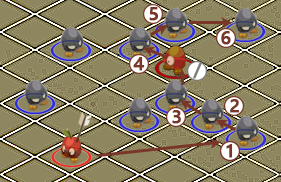
<style>
.page{position:relative;width:281px;height:182px;background:#8e865e}
.page>*{position:absolute;margin:0}
.t1{font:19px "SegoeUI-Semibold";color:#783729;font-weight:bold}
.t2{font:19px "SegoeUI-Semibold";color:#7c7c7c;font-weight:bold}
</style>
<div class="page">
<p class="t1" style="left:149px;top:7px;width:9px;height:14px">5</p>
<p class="t1" style="left:221px;top:31px;width:10px;height:14px">6</p>
<p class="t1" style="left:133px;top:57px;width:12px;height:14px">4</p>
<p class="t2" style="left:193px;top:63px;width:9px;height:16px">/</p>
<p class="t1" style="left:230px;top:99px;width:9px;height:14px">2</p>
<p class="t1" style="left:172px;top:110px;width:9px;height:14px">3</p>
<p class="t1" style="left:226px;top:144px;width:7px;height:14px">1</p>
<p class="t1" style="left:226px;top:144px;width:7px;height:14px">1</p>
</div>
